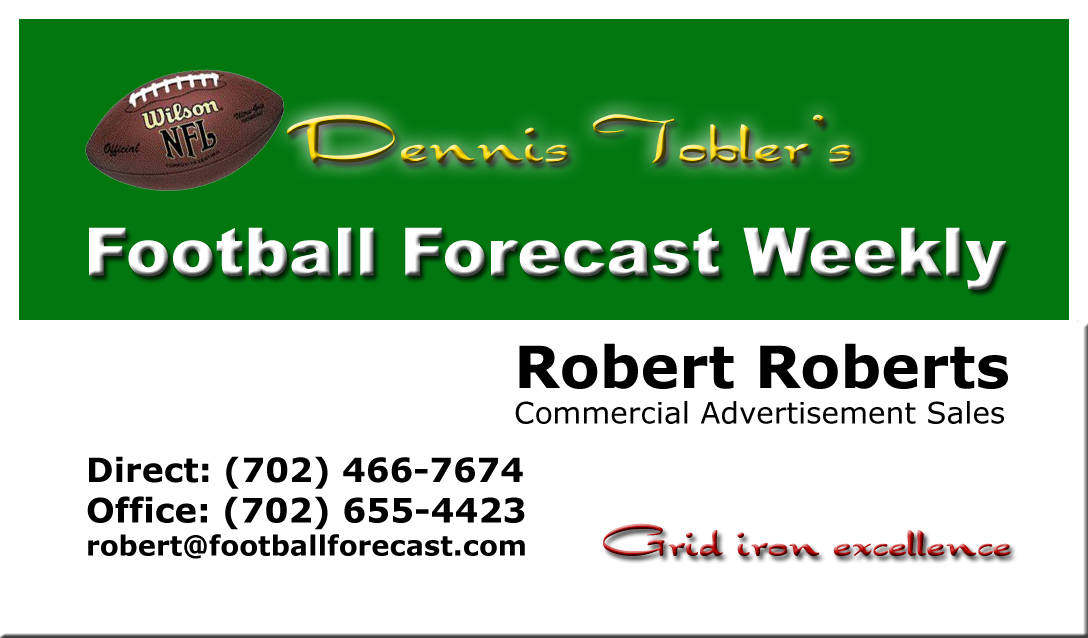
<style>
.page{position:relative;width:1088px;height:638px;background:#ffffff}
.page>*{position:absolute;margin:0}
.t1{font:29.6px "Verdana";color:#000000}
.t2{font:58.3px "Verdana-Bold";color:#000000}
.t3{font:27.5px "Verdana-Bold";color:#000000}
.t4{font:33.3px "Verdana-Bold";color:#000000}
.t5{font:33.8px "Verdana-Bold";color:#000000}
.t6{font:50px "Draconian"}
</style>
<div class="page">
<p class="t1" style="left:515px;top:343px;width:493px;height:81px"><span class="t2">Robert Roberts<br></span>Commercial Advertisement Sales</p>
<p class="t3" style="left:87px;top:456px;width:438px;height:103px"><span class="t4">Direct: (702) 466-7674<br></span><span class="t5">Office: (702) 655-4423<br></span>robert@footballforecast.com</p>
<p class="t6" style="left:603px;top:523px;width:408px;height:33px">Grid iron excellence</p>
</div>
